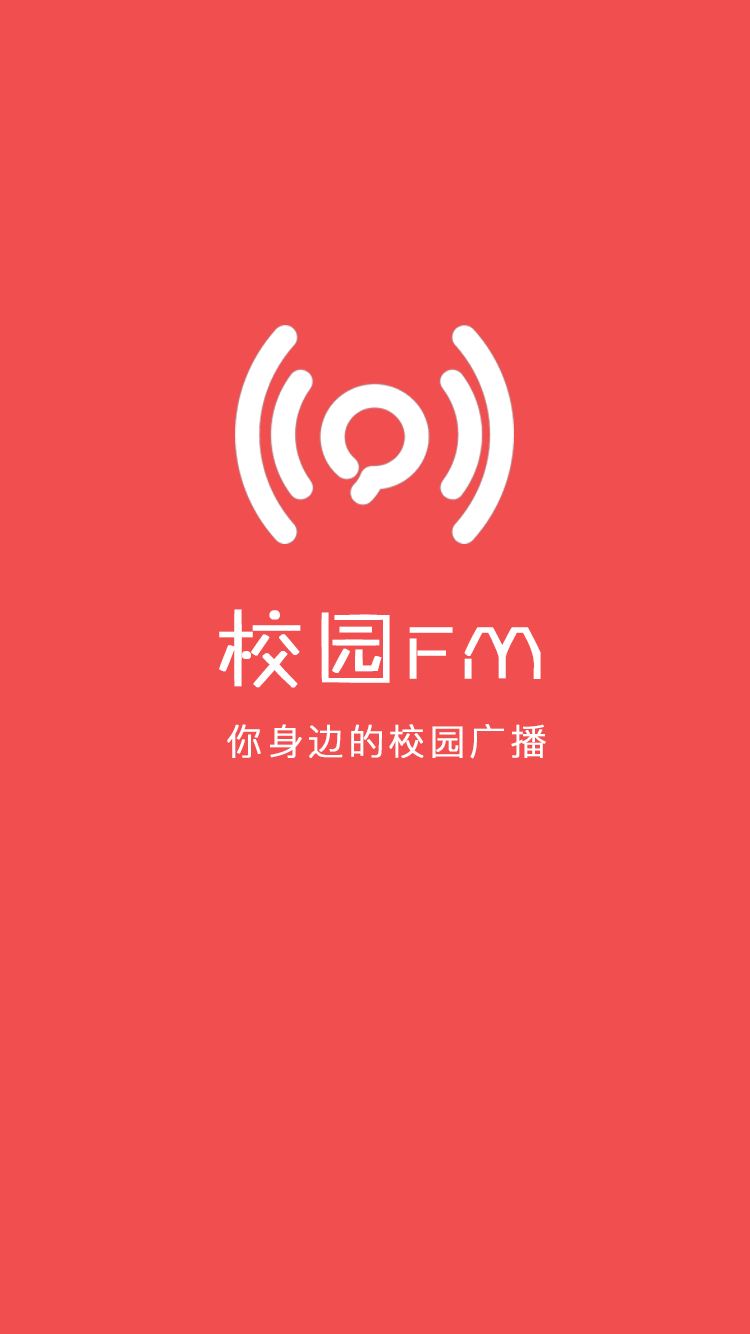
<style>
.page{position:relative;width:750px;height:1334px;background:#f04e4f}
.page>*{position:absolute;margin:0}
.t1{font:85px "FZZHYK--GBK1-0";letter-spacing:0.1em;color:#ffffff;text-transform:uppercase;font-weight:bold}
.t2{font:36px "PingFang-SC-Regular";letter-spacing:0.1em;color:#ffffff;text-transform:uppercase;font-weight:bold}
</style>
<div class="page">
<p class="t1" style="left:219px;top:609px;width:322px;height:79px">校园FM</p>
<p class="t2" style="left:227px;top:724px;width:319px;height:35px">你身边的校园广播</p>
</div>
